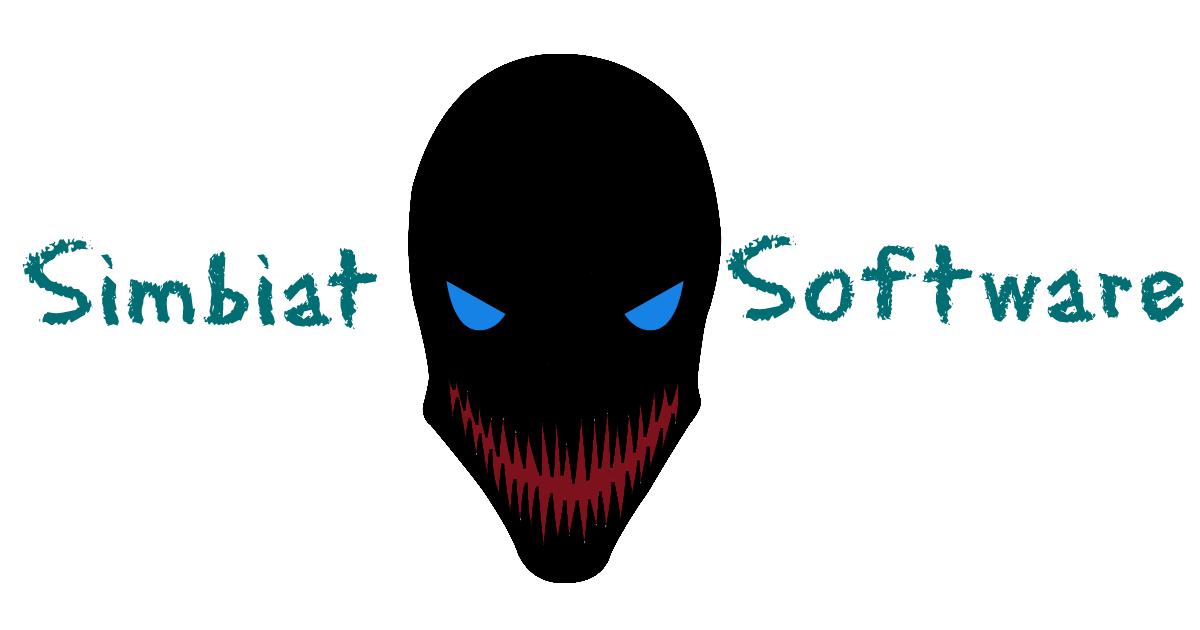
<style>
.page{position:relative;width:1200px;height:630px;background:#ffffff}
.page>*{position:absolute;margin:0}
.t1{font:110px "Eraser";color:#006e72}
</style>
<div class="page">
<p class="t1" style="left:726px;top:233px;width:458px;height:93px">Software</p>
<p class="t1" style="left:22px;top:237px;width:356px;height:93px">Simbiat</p>
</div>
